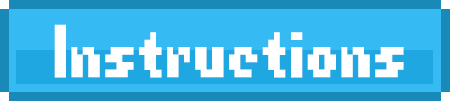
<style>
.page{position:relative;width:450px;height:101px;background:#35baf3}
.page>*{position:absolute;margin:0}
.t1{font:120.6px "198O";color:#ffffff}
</style>
<div class="page">
<p class="t1" style="left:54px;top:24px;width:350px;height:54px">Instructions</p>
</div>
